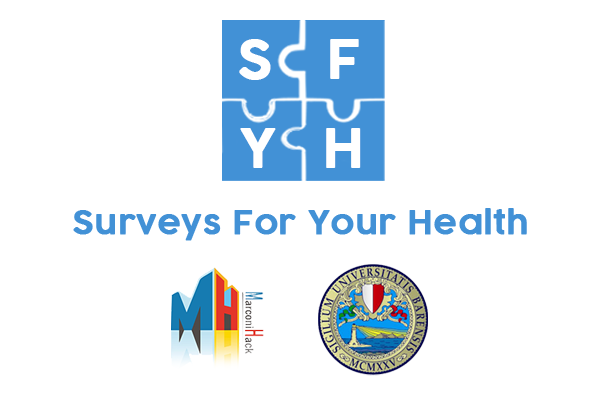
<style>
.page{position:relative;width:600px;height:400px;background:#ffffff}
.page>*{position:absolute;margin:0}
.t1{font:51.8px "COCOGOOSE-DemiBold";letter-spacing:0.1em;color:#ffffff;font-weight:bold}
.t2{font:32.1px "COCOGOOSE-DemiBold";color:#4291d6;font-weight:bold}
</style>
<div class="page">
<p class="t1" style="left:239px;top:39px;width:32px;height:41px">S</p>
<p class="t1" style="left:330px;top:39px;width:29px;height:40px">F</p>
<p class="t1" style="left:240px;top:128px;width:36px;height:40px">Y</p>
<p class="t1" style="left:326px;top:128px;width:35px;height:40px">H</p>
<p class="t2" style="left:73px;top:208px;width:454px;height:33px">Surveys For Your Health</p>
</div>
